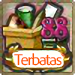
<style>
.page{position:relative;width:75px;height:75px}
.page>*{position:absolute;margin:0}
.t1{font:16px "AdobeClean-Regular";letter-spacing:-0.08em;color:#ff5a00}
</style>
<div class="page">
<p class="t1" style="left:14px;top:53px;width:48px;height:13px">Terbatas</p>
</div>
